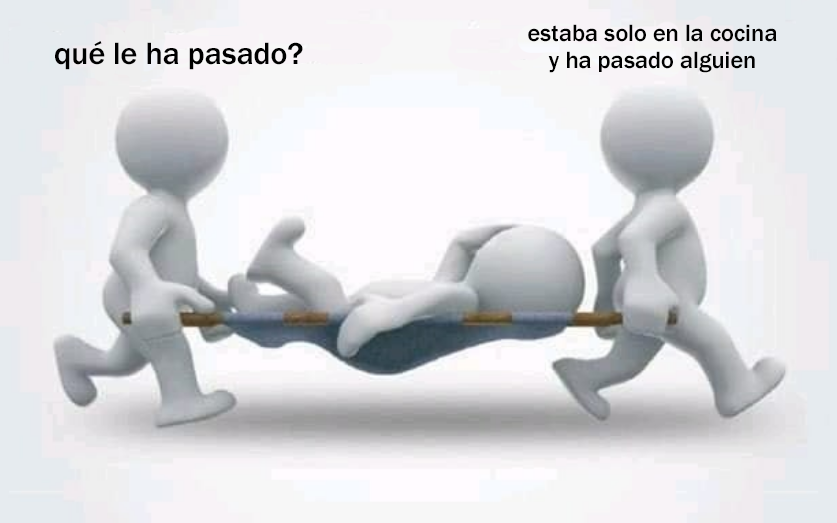
<style>
.page{position:relative;width:837px;height:523px}
.page>*{position:absolute;margin:0}
.t1{font:24.2px "FranklinGothic-Medium";color:#000000}
.t2{font:31.8px "FranklinGothic-Medium";color:#000000}
</style>
<div class="page">
<p class="t1" style="left:528px;top:24px;width:249px;height:49px;text-align:center">estaba solo en la cocina<br>y ha pasado alguien</p>
<p class="t2" style="left:55px;top:41px;width:248px;height:29px">qué le ha pasado?</p>
</div>
